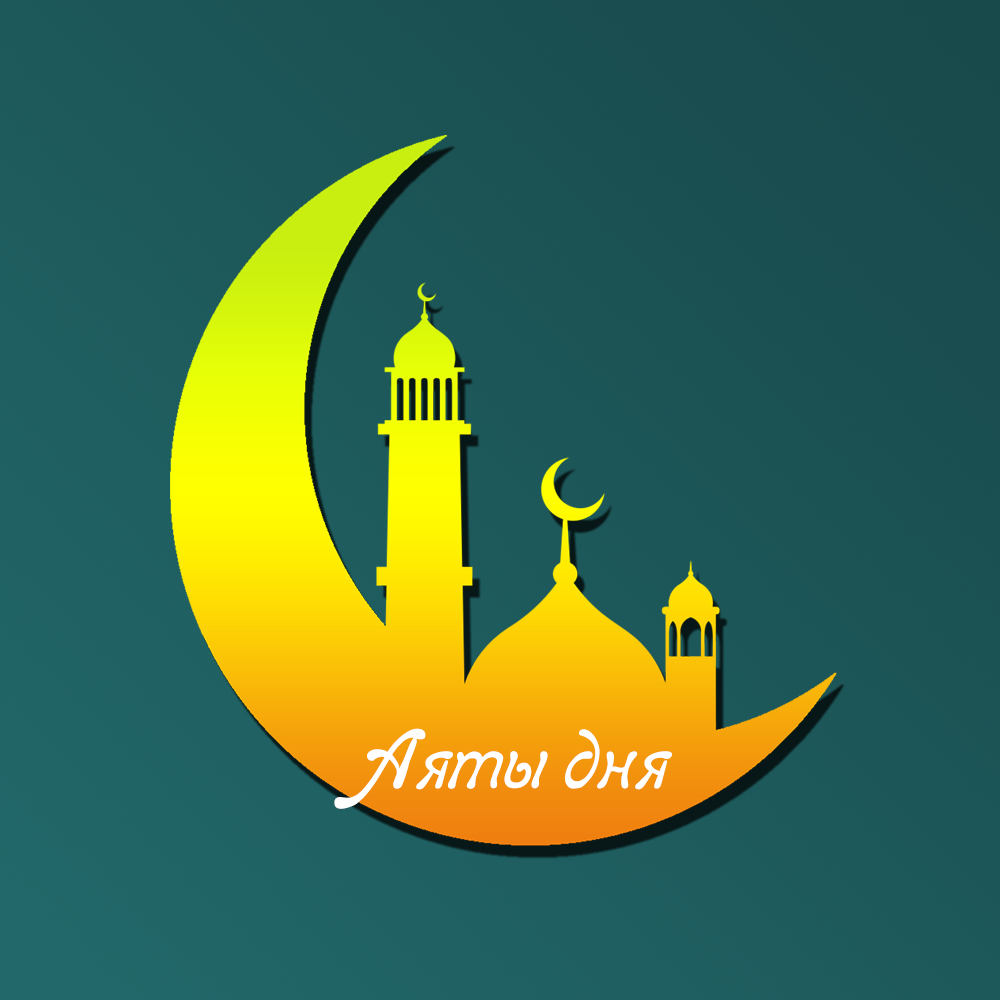
<style>
.page{position:relative;width:1000px;height:1000px}
.page>*{position:absolute;margin:0}
.t1{font:96.9px "ReginaKursiv-Italic";color:#ffffff}
</style>
<div class="page">
<p class="t1" style="left:334px;top:728px;width:338px;height:81px">Аяты дня</p>
</div>
